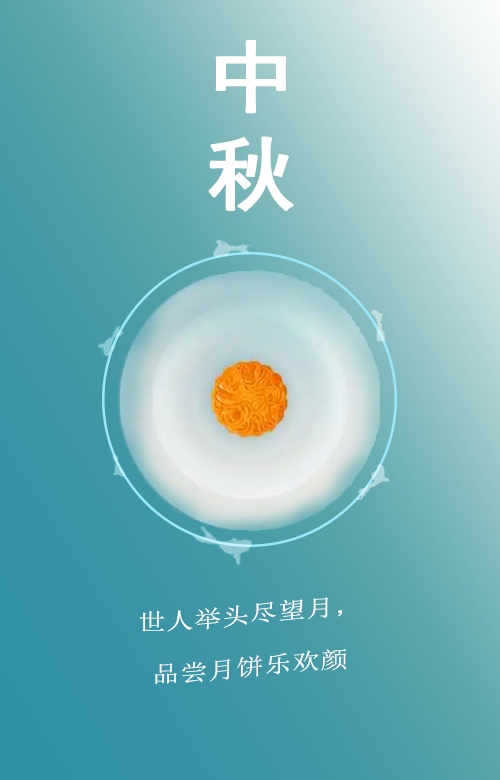
<style>
.page{position:relative;width:500px;height:780px}
.page>*{position:absolute;margin:0}
.t1{font:89px "SimHei";letter-spacing:0.25em;color:#ffffff;font-weight:bold;scale:0.88 1}
.t2{font:23.4px "SimSun";letter-spacing:0.05em;color:#ffffff;scale:1.14 1}
</style>
<div class="page">
<p class="t1" style="left:208px;top:40px;width:86px;height:172px;text-align:center">中秋</p>
<p class="t2" style="left:139px;top:597px;width:208px;height:87px;text-align:center">世人举头尽望月，<br>品尝月饼乐欢颜</p>
</div>
